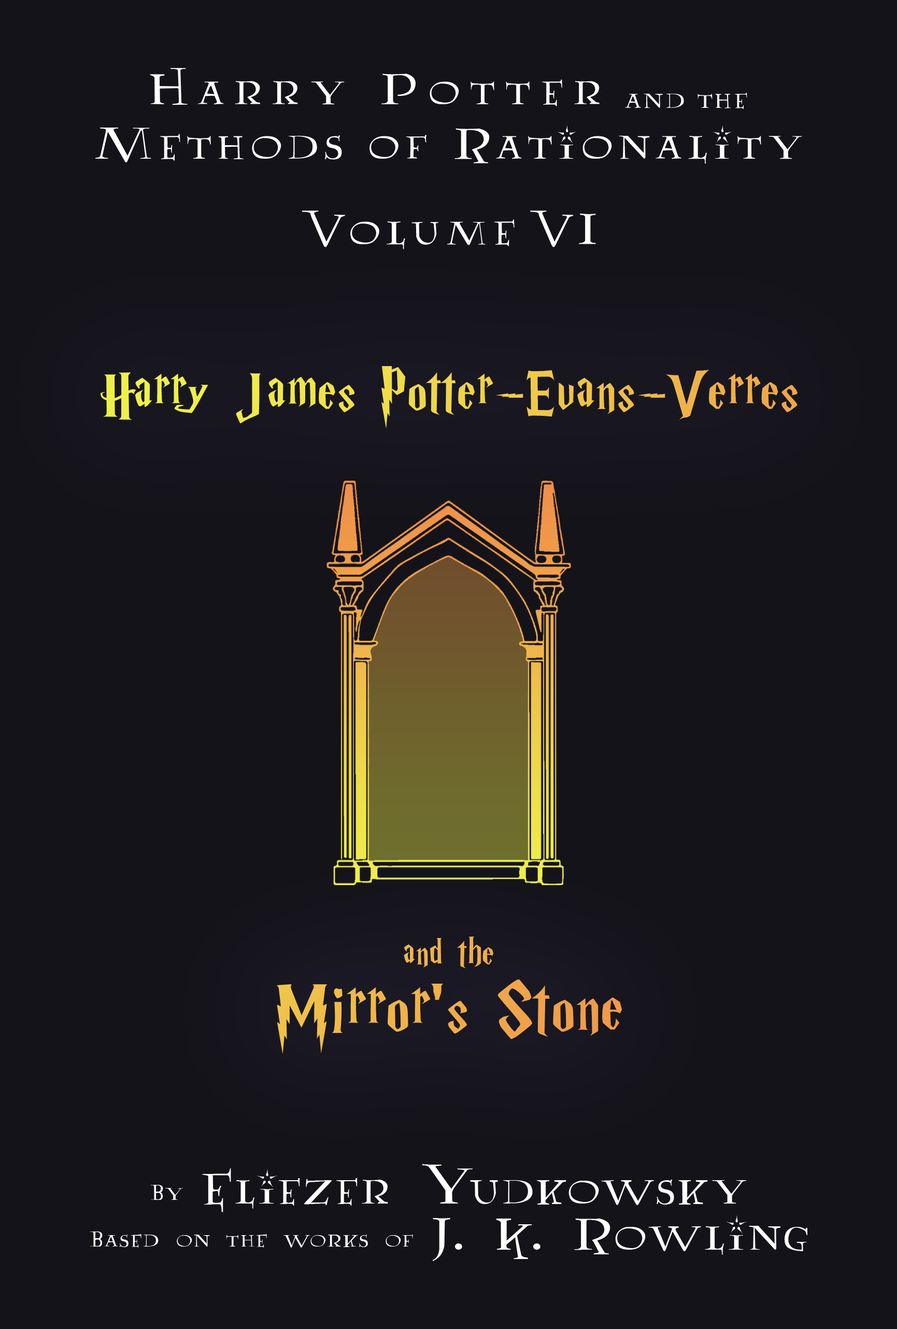
<style>
.page{position:relative;width:897px;height:1329px;background:#141319}
.page>*{position:absolute;margin:0}
.t1{font:50.3px/54.5px "Lumos";letter-spacing:0.1em;color:#ffffff}
.t2{font:50.3px/35.7px "Lumos";letter-spacing:0.2em;color:#ffffff}
.t3{font:31.1px/35.7px "Lumos";letter-spacing:0.05em;color:#ffffff}
.t4{font:50.3px "Lumos";letter-spacing:0.1em;color:#ffffff}
.t5{font:64.8px "HarryP";letter-spacing:0.025em}
.t6{font:41.5px "HarryP";letter-spacing:0.025em;color:#efaf49}
.t7{font:77.8px "HarryP";letter-spacing:0.025em;color:#efb049}
.t8{font:25.9px/46.1px "AA-Lumos-Caps";letter-spacing:0.05em;color:#ffffff}
.t9{font:51.8px/46.1px "AA-Lumos-Caps";letter-spacing:0.05em;color:#ffffff}
</style>
<div class="page">
<p class="t1" style="left:95px;top:68px;width:708px;height:96px;text-align:center"><span class="t2">Harry Potter  </span><span class="t3">and the<br></span>Methods of Rationality</p>
<p class="t4" style="left:302px;top:210px;width:294px;height:39px">Volume VI</p>
<p class="t5" style="left:100px;top:365px;width:698px;height:64px">Harry James Potter-Evans-Verres</p>
<p class="t6" style="left:404px;top:936px;width:90px;height:32px">and the</p>
<p class="t7" style="left:276px;top:979px;width:347px;height:75px">Mirror's Stone</p>
<p class="t8" style="left:90px;top:1164px;width:718px;height:97px;text-align:center">By <span class="t9">Eliezer Yudkowsky<br></span>Based on the works of <span class="t9">J. K. Rowling</span></p>
</div>
